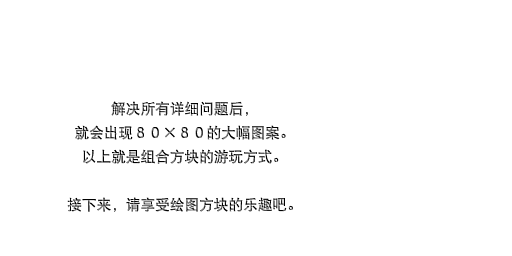
<style>
.page{position:relative;width:512px;height:256px;background:#ffffff}
.page>*{position:absolute;margin:0}
.t1{font:14.7px/24px "DFPHeiW5-GB"}
</style>
<div class="page">
<p class="t1" style="left:67px;top:101px;width:226px;height:111px;text-align:center">解决所有详细问题后，<br>就会出现８０×８０的大幅图案。<br>以上就是组合方块的游玩方式。<br><br>接下来，请享受绘图方块的乐趣吧。</p>
</div>
